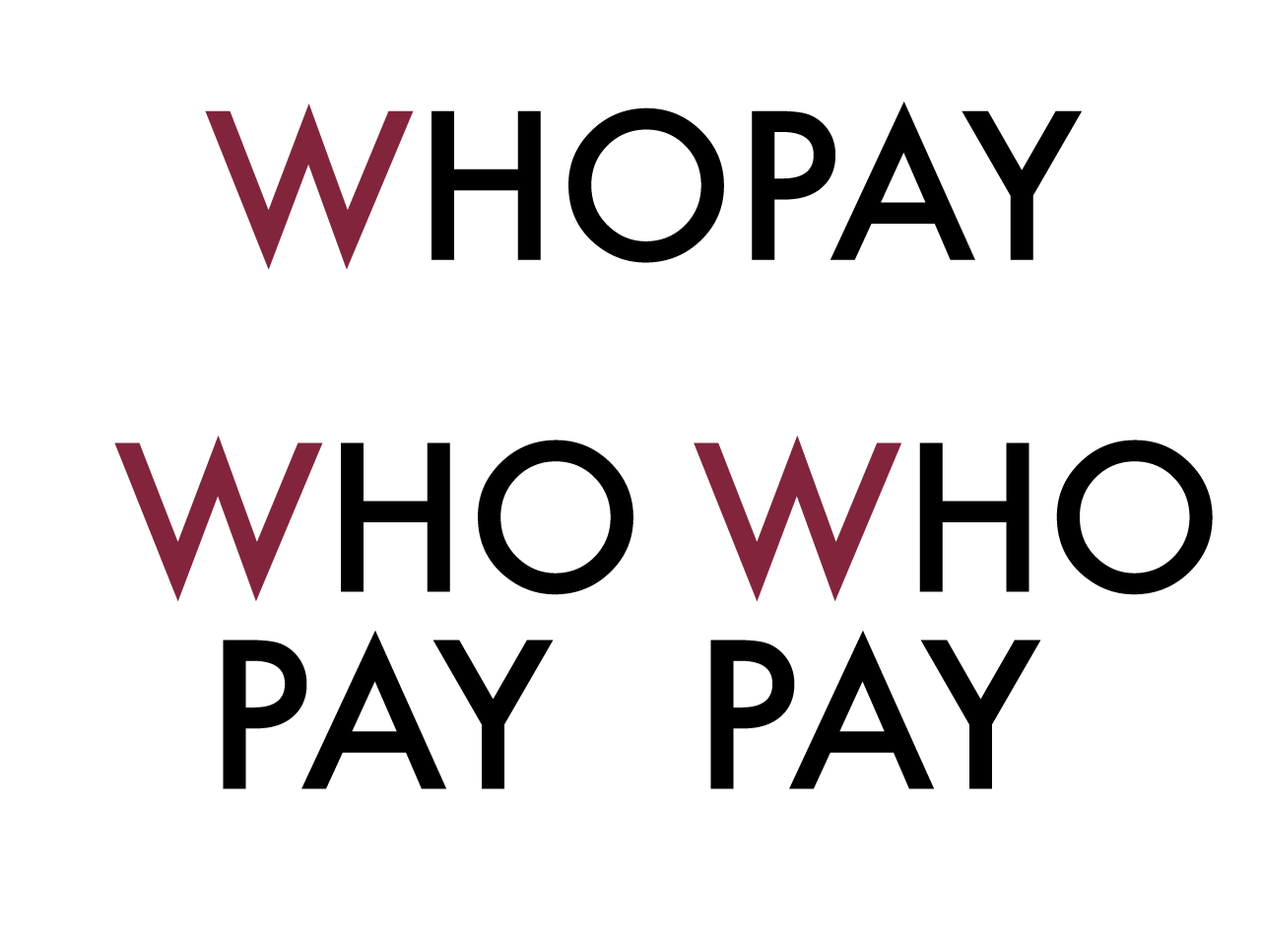
<style>
.page{position:relative;width:1261px;height:946px;background:#ffffff}
.page>*{position:absolute;margin:0}
.t1{font:197px "Futura-Medium";color:#000000}
.t2{font:197px "Futura-Medium";color:#82253c}
.t3{font:197px/197px "Futura-Medium";color:#000000}
.t4{font:197px/197px "Futura-Medium";color:#82253c}
</style>
<div class="page">
<p class="t1" style="left:205px;top:101px;width:877px;height:169px"><span class="t2">W</span>HOPAY</p>
<p class="t3" style="left:114px;top:435px;width:519px;height:354px;text-align:center"><span class="t4">W</span>HO<br>PAY</p>
<p class="t3" style="left:694px;top:435px;width:519px;height:354px"><span class="t4">W</span>HO<br>PAY</p>
</div>
